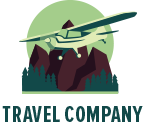
<style>
.page{position:relative;width:145px;height:124px;background:#ffffff}
.page>*{position:absolute;margin:0}
.t1{font:22.9px "ProximaNovaExCn-Bold";letter-spacing:0.02em;color:#124949;text-transform:uppercase}
</style>
<div class="page">
<p class="t1" style="left:2px;top:106px;width:141px;height:16px">travel company</p>
</div>
